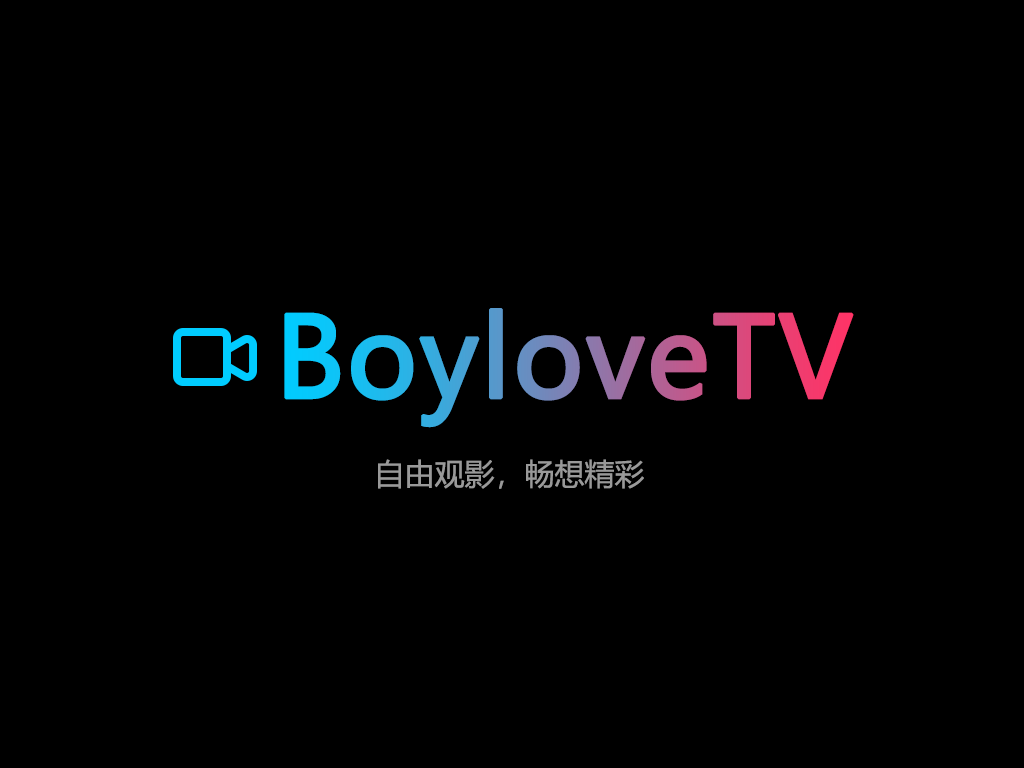
<style>
.page{position:relative;width:1024px;height:768px;background:#000000}
.page>*{position:absolute;margin:0}
.t1{font:110px "MicrosoftYaHei";font-weight:bold}
.t2{font:30px "MicrosoftYaHei";color:#999999}
</style>
<div class="page">
<p class="t1" style="left:284px;top:308px;width:570px;height:120px">BoyloveTV</p>
<p class="t2" style="left:378px;top:459px;width:266px;height:30px">自由观影，畅想精彩</p>
</div>
